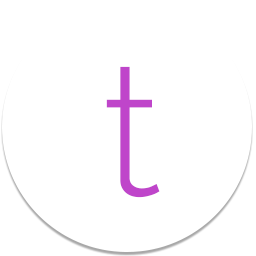
<style>
.page{position:relative;width:256px;height:256px;background:#ffffff}
.page>*{position:absolute;margin:0}
.t1{font:185px "Raleway-Light";color:#bf45ca}
</style>
<div class="page">
<p class="t1" style="left:106px;top:66px;width:54px;height:132px">t</p>
</div>
